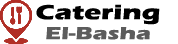
<style>
.page{position:relative;width:178px;height:44px;background:#ffffff}
.page>*{position:absolute;margin:0}
.t1{font:21px/20px "ErasITC-Bold";color:#000000;scale:1.36 1}
.t2{font:18px/20px "ErasITC-Bold";color:#5c5c5c;scale:1.36 1}
</style>
<div class="page">
<p class="t1" style="left:36px;top:4px;width:124px;height:36px;text-align:center">Catering<br><span class="t2">El-Basha</span></p>
</div>
